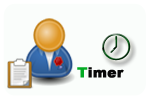
<style>
.page{position:relative;width:150px;height:100px;background:#fafdfb}
.page>*{position:absolute;margin:0}
.t1{font:14px "Arial-Black";color:#080808;font-weight:bold}
.t2{font:14px "Arial-Black";color:#03ab24;font-weight:bold}
</style>
<div class="page">
<p class="t1" style="left:77px;top:67px;width:47px;height:11px"><span class="t2">T</span>imer</p>
</div>
